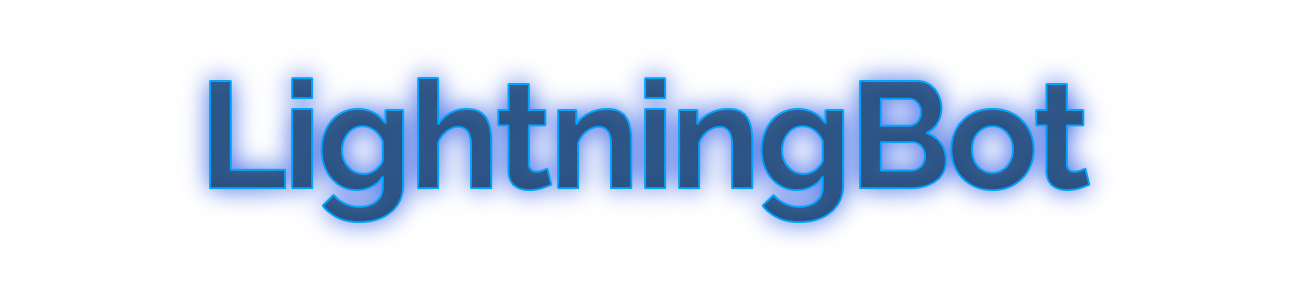
<style>
.page{position:relative;width:1300px;height:300px;background:#ffffff}
.page>*{position:absolute;margin:0}
.t1{font:150px "RalewayRoman-Bold";letter-spacing:-0.025em;color:#2d5587}
</style>
<div class="page">
<p class="t1" style="left:210px;top:78px;width:880px;height:144px">LightningBot</p>
</div>
